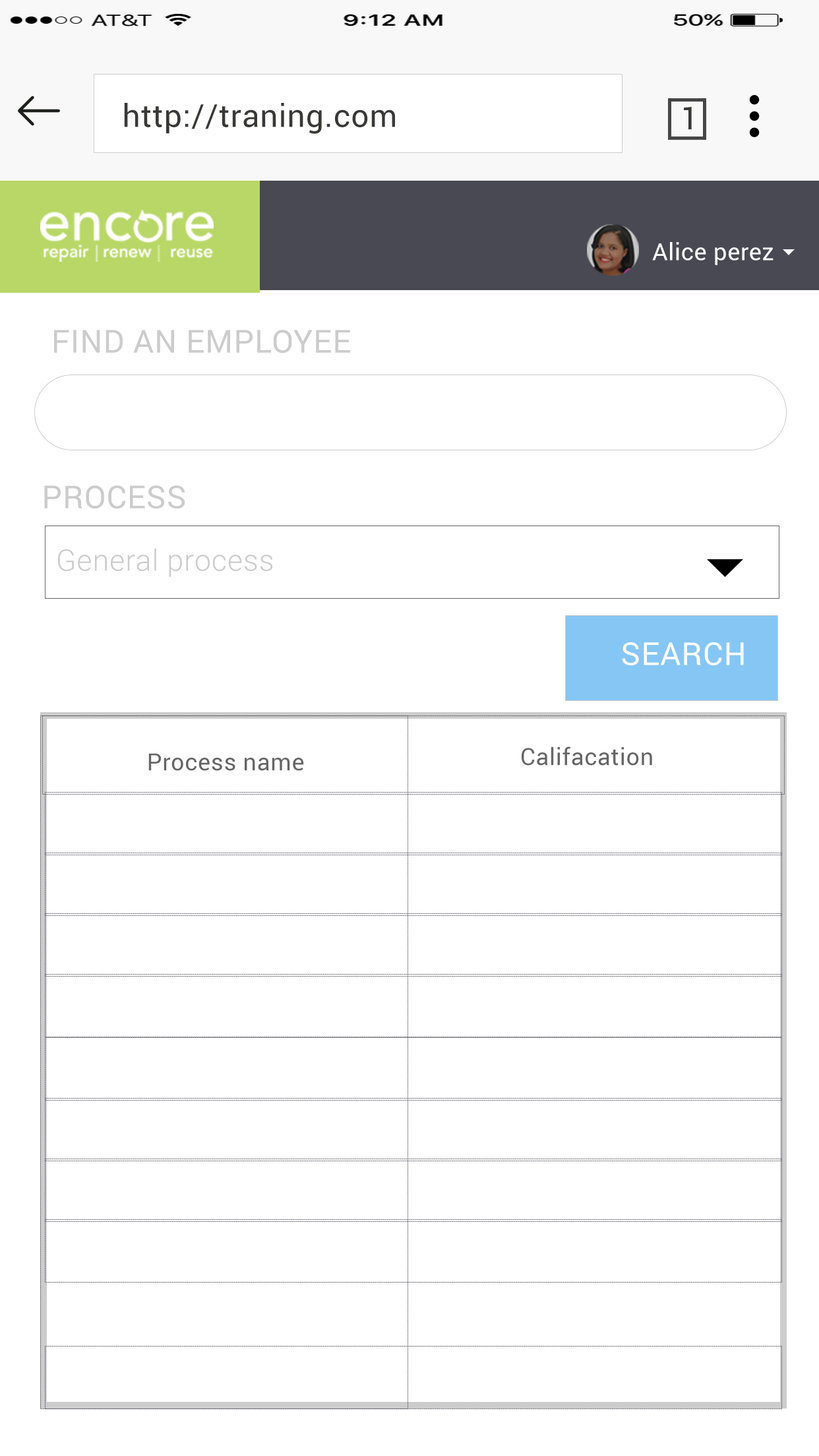
<style>
.page{position:relative;width:819px;height:1456px;background:#ffffff}
.page>*{position:absolute;margin:0}
.t1{font:31.7px "Roboto-Regular";letter-spacing:0.02em;color:#383936}
.t2{font:23.7px "Roboto-Regular";letter-spacing:0.02em;color:#fdfeff}
.t3{font:31.7px "Roboto-Regular";letter-spacing:0.02em;color:#cccccc}
.t4{font:29.7px "Roboto-Light";letter-spacing:0.02em;color:#cccccc}
.t5{font:31.7px "Roboto-Regular";letter-spacing:0.02em;color:#fdfeff}
.t6{font:23.7px "Roboto-Regular";letter-spacing:0.02em;color:#666666}
</style>
<div class="page">
<p class="t1" style="left:124px;top:103px;width:271px;height:31px">http://traning.com</p>
<p class="t1" style="left:684px;top:107px;width:8px;height:23px">1</p>
<p class="t2" style="left:652px;top:242px;width:121px;height:23px">Alice perez</p>
<p class="t3" style="left:54px;top:330px;width:296px;height:23px">FIND AN EMPLOYEE</p>
<p class="t3" style="left:44px;top:485px;width:141px;height:24px">PROCESS</p>
<p class="t4" style="left:58px;top:548px;width:214px;height:29px">General process</p>
<p class="t5" style="left:622px;top:642px;width:122px;height:23px">SEARCH</p>
<p class="t6" style="left:522px;top:746px;width:130px;height:20px">Califacation</p>
<p class="t6" style="left:148px;top:753px;width:156px;height:18px">Process name</p>
</div>
